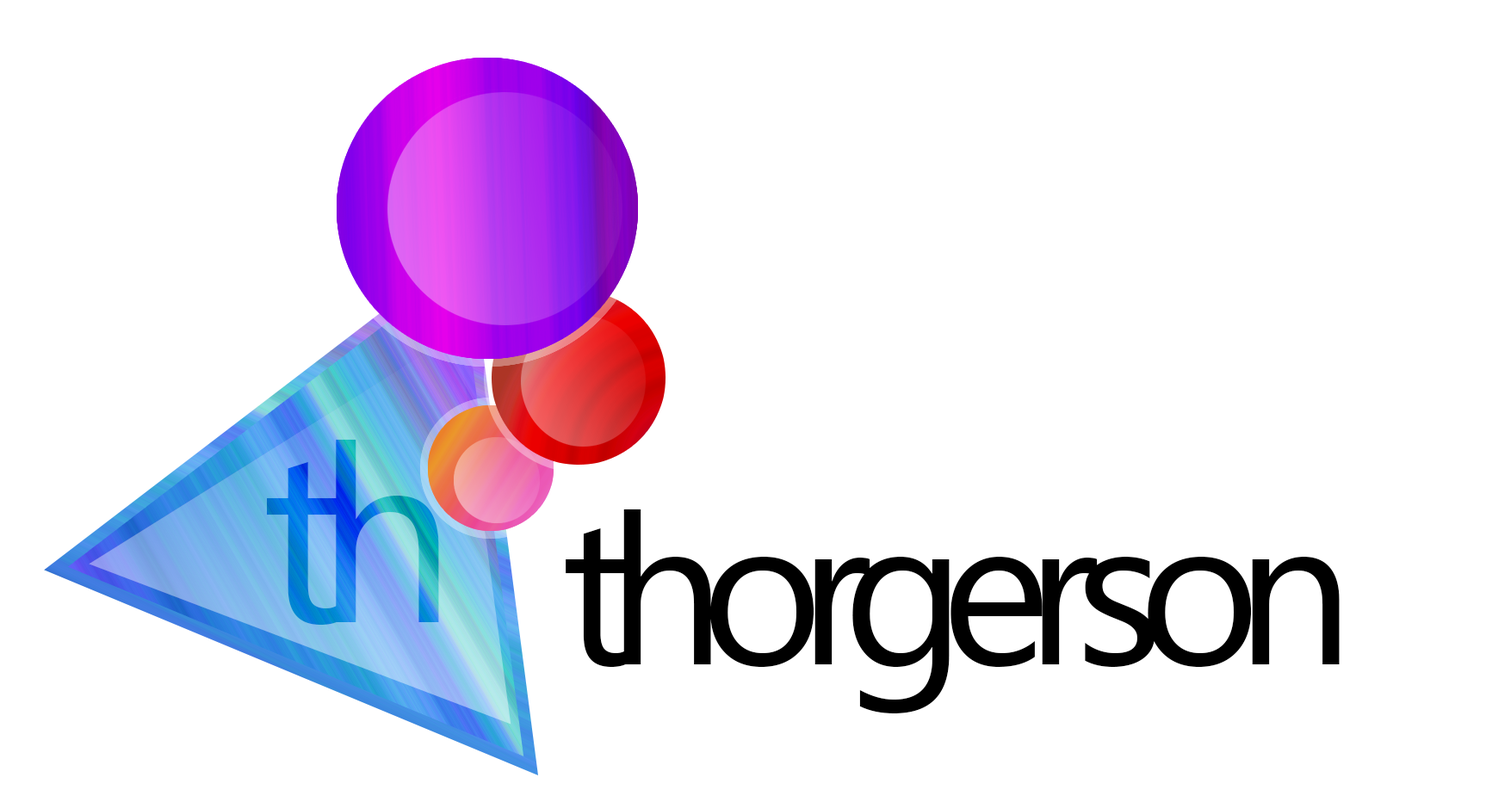
<style>
.page{position:relative;width:1486px;height:802px;background:#ffffff}
.page>*{position:absolute;margin:0}
.t1{font:247.1px "SegoeUI";letter-spacing:-0.12em}
.t2{font:209.2px "SegoeUI";letter-spacing:-0.12em;color:#000000}
</style>
<div class="page">
<p class="t1" style="left:267px;top:439px;width:172px;height:186px">th</p>
<p class="t2" style="left:566px;top:509px;width:774px;height:205px">thorgerson</p>
</div>
